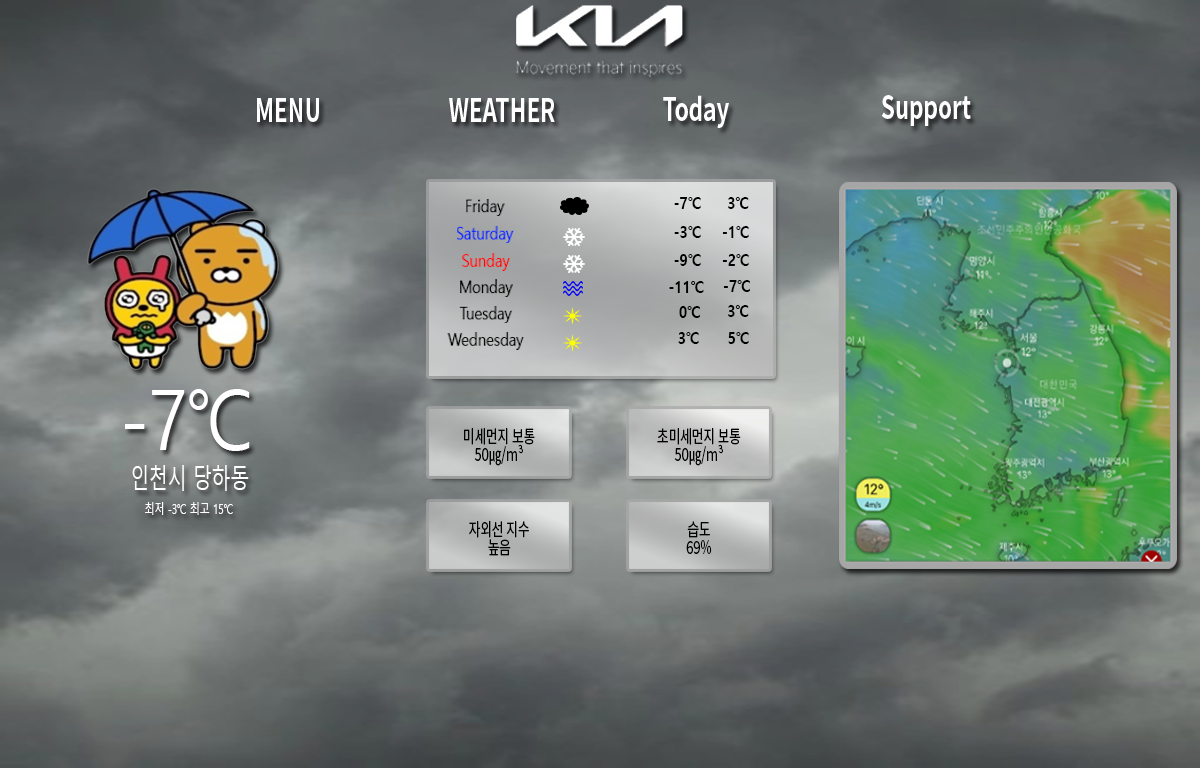
<style>
.page{position:relative;width:1200px;height:768px}
.page>*{position:absolute;margin:0}
.t1{font:17.2px "MalgunGothicBold";color:#000000;scale:0.83 1}
.t2{font:17.5px "MalgunGothic";color:#000000;scale:0.82 1}
.t3{font:17.5px "MalgunGothic";color:#0024ff;scale:0.82 1}
.t4{font:17.5px "MalgunGothic";color:#ff0000;scale:0.82 1}
.t5{font:82.6px "MalgunGothic";color:#ffffff;scale:0.85 1}
.t6{font:18.1px/18.1px "NotoSansKR-Regular";color:#000000;scale:0.69 1}
.t7{font:26.6px "MalgunGothic";color:#ffffff;scale:0.7 1}
.t8{font:14px "MalgunGothic";color:#ffffff;scale:0.7 1}
</style>
<div class="page">
<p class="t1" style="left:674px;top:197px;width:27px;height:12px">-7℃</p>
<p class="t1" style="left:728px;top:197px;width:21px;height:12px">3℃</p>
<p class="t2" style="left:466px;top:199px;width:39px;height:17px">Friday</p>
<p class="t3" style="left:457px;top:226px;width:57px;height:17px">Saturday</p>
<p class="t1" style="left:674px;top:226px;width:27px;height:12px">-3℃</p>
<p class="t1" style="left:722px;top:226px;width:27px;height:12px">-1℃</p>
<p class="t4" style="left:462px;top:253px;width:48px;height:18px">Sunday</p>
<p class="t1" style="left:674px;top:254px;width:27px;height:12px">-9℃</p>
<p class="t1" style="left:722px;top:254px;width:27px;height:12px">-2℃</p>
<p class="t2" style="left:460px;top:279px;width:53px;height:18px">Monday</p>
<p class="t1" style="left:669px;top:281px;width:35px;height:12px">-11℃</p>
<p class="t1" style="left:723px;top:280px;width:27px;height:12px">-7℃</p>
<p class="t1" style="left:728px;top:305px;width:21px;height:12px">3℃</p>
<p class="t2" style="left:459px;top:306px;width:54px;height:17px">Tuesday</p>
<p class="t1" style="left:679px;top:306px;width:21px;height:12px">0℃</p>
<p class="t2" style="left:447px;top:332px;width:77px;height:18px">Wednesday</p>
<p class="t1" style="left:678px;top:332px;width:21px;height:12px">3℃</p>
<p class="t1" style="left:728px;top:332px;width:21px;height:12px">5℃</p>
<p class="t5" style="left:125px;top:389px;width:125px;height:62px">-7℃</p>
<p class="t6" style="left:464px;top:428px;width:71px;height:38px;text-align:center">미세먼지 보통<br>50㎍/m³</p>
<p class="t6" style="left:657px;top:428px;width:84px;height:38px;text-align:center">초미세먼지 보통<br>50㎍/m³</p>
<p class="t7" style="left:132px;top:465px;width:117px;height:26px">인천시 당하동</p>
<p class="t8" style="left:145px;top:502px;width:88px;height:13px">최저 -3℃ 최고 15℃</p>
<p class="t6" style="left:469px;top:520px;width:60px;height:36px;text-align:center">자외선 지수<br>높음</p>
<p class="t6" style="left:686px;top:521px;width:26px;height:33px;text-align:center">습도<br>69%</p>
</div>
